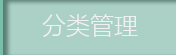
<style>
.page{position:relative;width:176px;height:55px;background:#abd0c6}
.page>*{position:absolute;margin:0}
.t1{font:24px "MicrosoftYaHeiLight";color:#f1f0f0}
</style>
<div class="page">
<p class="t1" style="left:42px;top:14px;width:96px;height:23px">分类管理</p>
</div>
